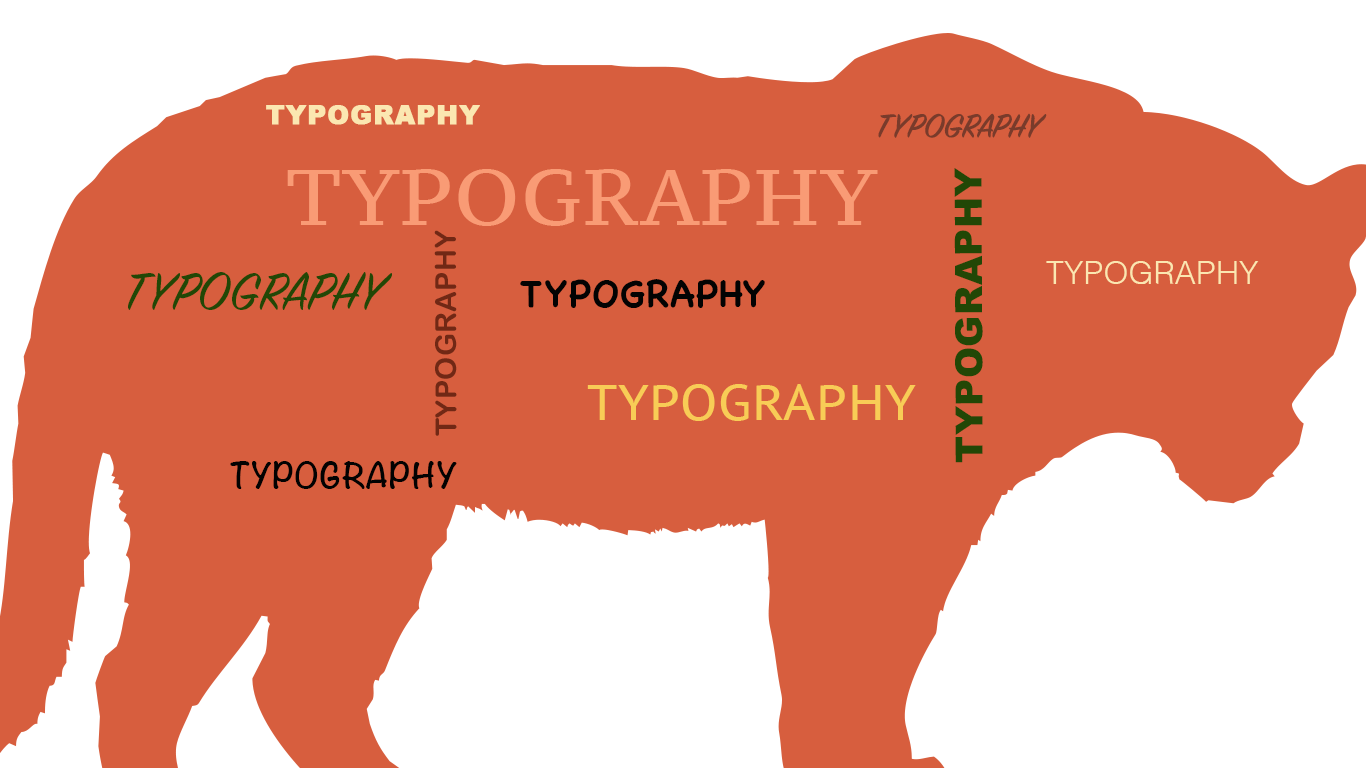
<style>
.page{position:relative;width:1366px;height:768px;background:#d75e3e}
.page>*{position:absolute;margin:0}
.t1{font:26.4px "Arial-Black";letter-spacing:0.01em;color:#fbe7b2;font-weight:bold}
.t2{font:37px "SignPainter-HouseScriptSemibold";letter-spacing:0.01em;color:#793b2b}
.t3{font:79.3px "PTSerif-Caption";letter-spacing:0.01em;color:#f99b75}
.t4{font:37.5px "Arial-Black";letter-spacing:0.01em;color:#224706}
.t5{font:29.1px "ArialRoundedMTBold";letter-spacing:0.01em;color:#712815}
.t6{font:31.7px "Helvetica-Light";letter-spacing:0.01em;color:#fbe7b1}
.t7{font:58.3px "SignPainter-HouseScript";letter-spacing:0.01em;color:#224706}
.t8{font:37px "ChalkboardSE-Bold";letter-spacing:0.01em;color:#030303}
.t9{font:50.1px "PTSans-Caption";letter-spacing:0.01em;color:#f8cc56}
.t10{font:31.4px "Noteworthy-Bold";letter-spacing:0.01em;color:#020202}
</style>
<div class="page">
<p class="t1" style="left:266px;top:105px;width:214px;height:20px">TYPOGRAPHY</p>
<p class="t2" style="left:878px;top:113px;width:169px;height:25px">TYPOGRAPHY</p>
<p class="t3" style="left:287px;top:169px;width:591px;height:57px">TYPOGRAPHY</p>
<p class="t4" style="left:954px;top:168px;width:29px;height:295px;rotate:-90deg">TYPOGRAPHY</p>
<p class="t5" style="left:434px;top:230px;width:23px;height:206px;rotate:-90deg">TYPOGRAPHY</p>
<p class="t6" style="left:1046px;top:261px;width:213px;height:23px">TYPOGRAPHY</p>
<p class="t7" style="left:128px;top:272px;width:264px;height:38px">TYPOGRAPHY</p>
<p class="t8" style="left:520px;top:279px;width:245px;height:29px">TYPOGRAPHY</p>
<p class="t9" style="left:587px;top:384px;width:329px;height:37px">TYPOGRAPHY</p>
<p class="t10" style="left:230px;top:461px;width:227px;height:28px">TYPOGRAPHY</p>
</div>
